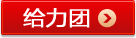
<style>
.page{position:relative;width:136px;height:38px}
.page>*{position:absolute;margin:0}
.t1{font:20px "MicrosoftYaHei";color:#ffffff;font-weight:bold;scale:1.1 1}
</style>
<div class="page">
<p class="t1" style="left:23px;top:8px;width:67px;height:20px">给力团</p>
</div>
